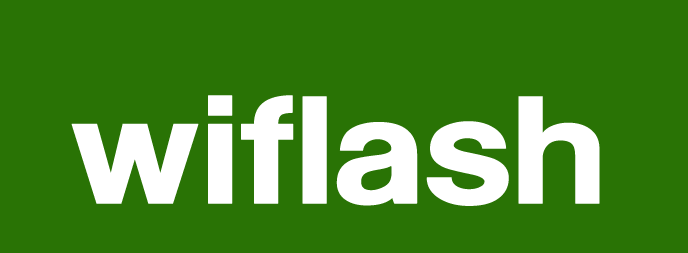
<style>
.page{position:relative;width:688px;height:253px;background:#297305}
.page>*{position:absolute;margin:0}
.t1{font:148px "Coolvetica";color:#ffffff;font-weight:bold;scale:1.12 1}
</style>
<div class="page">
<p class="t1" style="left:71px;top:95px;width:529px;height:111px">wiflash</p>
</div>
